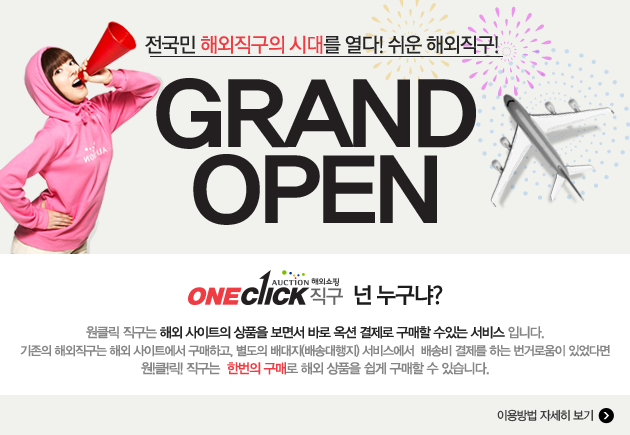
<style>
.page{position:relative;width:630px;height:435px;background:#f1f1ee}
.page>*{position:absolute;margin:0}
.t1{font:20px "RixGoM";letter-spacing:-0.05em;color:#252525;text-transform:uppercase}
.t2{font:20px "RixGoM";letter-spacing:-0.05em;color:#ef3c42;text-transform:uppercase}
.t3{font:94.9px/75.9px "YDIYGO250-KSCpc-EUC-H";letter-spacing:-0.2em;color:#231f20;text-transform:uppercase;scale:1.05 1}
.t4{font:22px "RixGoB";letter-spacing:-0.05em;color:#1c1c1c;text-transform:uppercase}
.t5{font:12.6px/18px "YDIYGO330";letter-spacing:-0.075em;color:#868686;text-transform:uppercase;scale:0.97 1}
.t6{font:13.6px/18px "YDIYGO330";letter-spacing:-0.075em;color:#868686;text-transform:uppercase;scale:0.97 1}
.t7{font:13.6px/18px "YDIYGO330";letter-spacing:-0.075em;color:#252525;text-transform:uppercase;scale:0.97 1}
.t8{font:13.6px/18px "YDIYGO330";letter-spacing:-0.075em;color:#ef3c43;text-transform:uppercase;scale:0.97 1}
.t9{font:12px "YDIYGO320";letter-spacing:-0.05em;color:#333333;text-transform:uppercase;scale:0.95 1}
</style>
<div class="page">
<p class="t1" style="left:145px;top:35px;width:353px;height:19px">전국민 <span class="t2">해외직구의 시대</span>를 열다! 쉬운 해외직구!</p>
<p class="t3" style="left:156px;top:78px;width:320px;height:147px;text-align:center">Grand<br>Open</p>
<p class="t4" style="left:354px;top:285px;width:89px;height:20px">넌 누구냐?</p>
<p class="t5" style="left:20px;top:326px;width:590px;height:49px;text-align:center"><span class="t6">원클릭 직구는 </span><span class="t7">해외 사이트의 상품을 보면서 바로 옥션 결제로 구매할 수있는 서비스</span><span class="t6"> 입니다. <br></span>기존의 해외직구는 해외 사이트에서 구매하고, 별도의 배대지(배송대행지) 서비스에서  배송비 결제를 하는 번거로움이 있었다면 <br><span class="t6">원!클!릭! 직구는 </span><span class="t8"> 한번의 구매</span><span class="t6">로 해외 상품을 쉽게 구매할 수 있습니다.</span></p>
<p class="t9" style="left:497px;top:409px;width:96px;height:13px">이용방법 자세히 보기</p>
</div>
